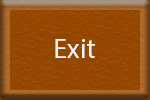
<style>
.page{position:relative;width:150px;height:100px}
.page>*{position:absolute;margin:0}
.t1{font:27.6px "MyriadPro-Regular";color:#f8f8f8}
</style>
<div class="page">
<p class="t1" style="left:55px;top:39px;width:40px;height:19px">Exit</p>
</div>
